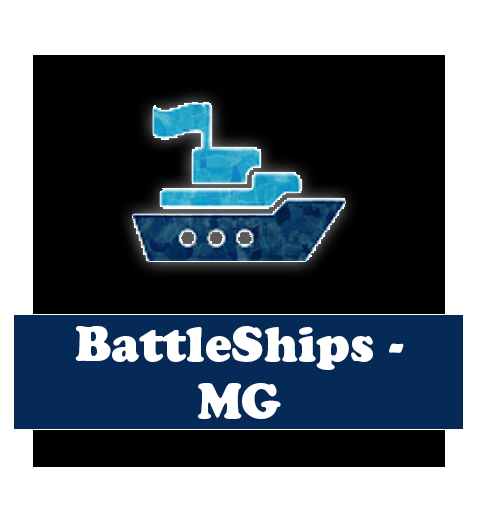
<style>
.page{position:relative;width:477px;height:521px;background:#000000}
.page>*{position:absolute;margin:0}
.t1{font:48px "CooperBlackStd";color:#ffffff}
</style>
<div class="page">
<p class="t1" style="left:75px;top:326px;width:329px;height:93px;text-align:center">BattleShips - MG</p>
</div>
